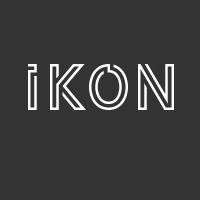
<style>
.page{position:relative;width:200px;height:200px;background:#333333}
.page>*{position:absolute;margin:0}
.t1{font:60px "LIBRARY3AM";color:#ffffff}
</style>
<div class="page">
<p class="t1" style="left:28px;top:64px;width:146px;height:46px">IKON</p>
</div>
